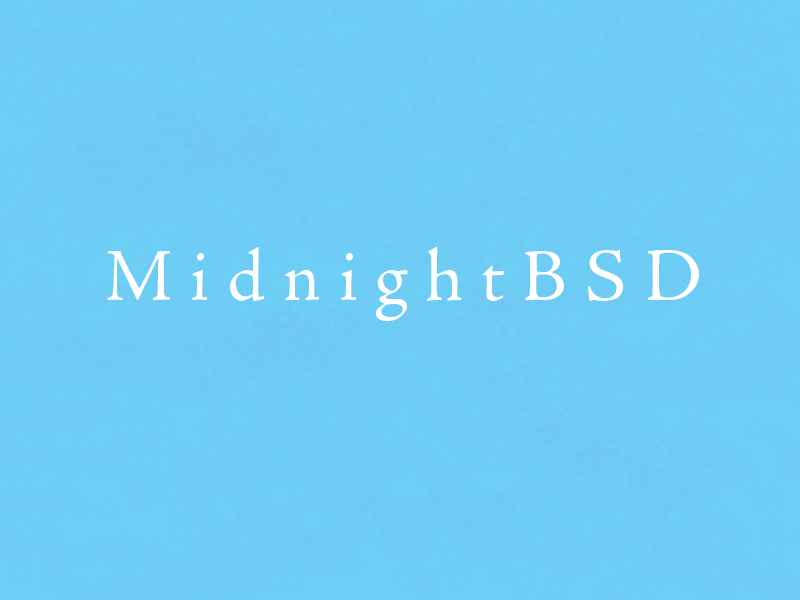
<style>
.page{position:relative;width:800px;height:600px;background:#6dcff6}
.page>*{position:absolute;margin:0}
.t1{font:75px "AJensonPro-Regular";letter-spacing:0.24em;color:#ffffff}
</style>
<div class="page">
<p class="t1" style="left:107px;top:247px;width:592px;height:74px">MidnightBSD</p>
</div>
